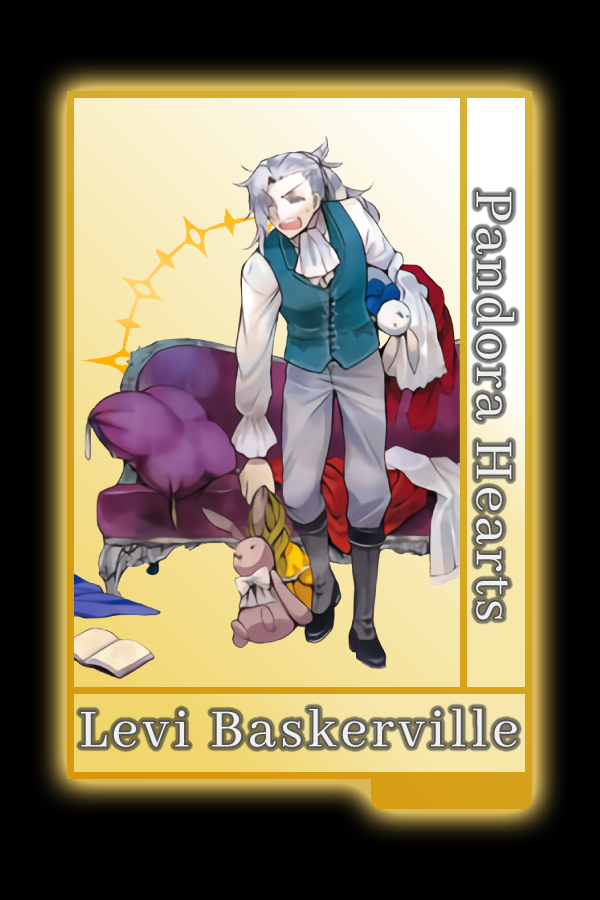
<style>
.page{position:relative;width:600px;height:900px;background:#000000}
.page>*{position:absolute;margin:0}
.t1{font:59.1px "AbhayaLibre-Regular";letter-spacing:0.072em;color:#efefef}
.t2{font:59px "AbhayaLibre-Regular";letter-spacing:0.072em;color:#efefef}
</style>
<div class="page">
<p class="t1" style="left:476px;top:192px;width:39px;height:428px;rotate:90deg">Pandora Hearts</p>
<p class="t2" style="left:81px;top:708px;width:436px;height:40px">Levi Baskerville</p>
</div>
